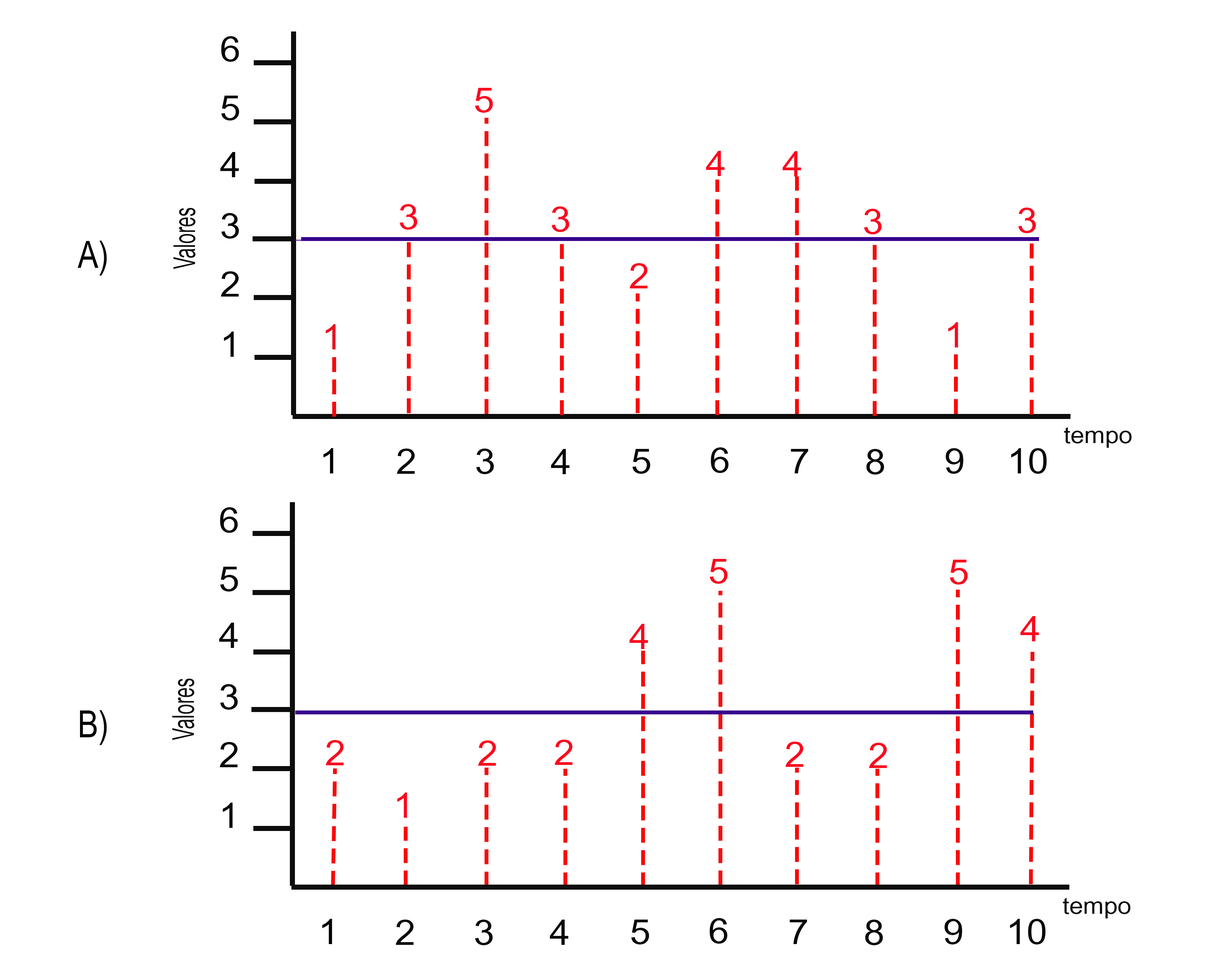
<style>
.page{position:relative;width:1224px;height:974px;background:#ffffff}
.page>*{position:absolute;margin:0}
.t1{font:59px "ArialNarrow";color:#090909;scale:1.32 1}
.t2{font:59px "ArialNarrow";color:#fb071e;scale:1.32 1}
.t3{font:51.8px "ArialNarrow";color:#090909;scale:0.76 1}
.t4{font:64.8px "ArialNarrow";color:#000000}
.t5{font:59px "ArialNarrow";color:#e61423;scale:1.32 1}
.t6{font:39.4px "ArialNarrow";color:#090909;scale:1.32 1}
.t7{font:59px "ArialNarrow";color:#000000;scale:1.32 1}
</style>
<div class="page">
<p class="t1" style="left:221px;top:36px;width:18px;height:26px">6</p>
<p class="t2" style="left:475px;top:88px;width:18px;height:25px">5</p>
<p class="t1" style="left:221px;top:96px;width:18px;height:24px">5</p>
<p class="t1" style="left:220px;top:152px;width:19px;height:25px">4</p>
<p class="t2" style="left:706px;top:151px;width:19px;height:25px">4</p>
<p class="t2" style="left:783px;top:151px;width:18px;height:25px">4</p>
<p class="t3" style="left:173px;top:208px;width:22px;height:61px;rotate:-90deg">Valores</p>
<p class="t2" style="left:400px;top:204px;width:17px;height:26px">3</p>
<p class="t2" style="left:552px;top:206px;width:17px;height:26px">3</p>
<p class="t2" style="left:864px;top:209px;width:18px;height:25px">3</p>
<p class="t2" style="left:1018px;top:208px;width:18px;height:25px">3</p>
<p class="t1" style="left:221px;top:213px;width:18px;height:26px">3</p>
<p class="t4" style="left:78px;top:241px;width:29px;height:35px">A)</p>
<p class="t2" style="left:630px;top:263px;width:18px;height:25px">2</p>
<p class="t1" style="left:221px;top:271px;width:18px;height:26px">2</p>
<p class="t5" style="left:326px;top:324px;width:10px;height:25px">1</p>
<p class="t2" style="left:948px;top:322px;width:10px;height:25px">1</p>
<p class="t1" style="left:224px;top:332px;width:10px;height:25px">1</p>
<p class="t6" style="left:1064px;top:427px;width:68px;height:21px">tempo</p>
<p class="t7" style="left:323px;top:448px;width:10px;height:25px">1</p>
<p class="t1" style="left:397px;top:449px;width:18px;height:25px">2</p>
<p class="t1" style="left:476px;top:449px;width:18px;height:25px">3</p>
<p class="t1" style="left:551px;top:449px;width:19px;height:25px">4</p>
<p class="t1" style="left:632px;top:449px;width:19px;height:25px">5</p>
<p class="t1" style="left:711px;top:447px;width:18px;height:26px">6</p>
<p class="t1" style="left:791px;top:449px;width:17px;height:24px">7</p>
<p class="t1" style="left:866px;top:449px;width:19px;height:26px">8</p>
<p class="t1" style="left:946px;top:448px;width:18px;height:26px">9</p>
<p class="t1" style="left:1011px;top:448px;width:36px;height:26px">10</p>
<p class="t1" style="left:220px;top:507px;width:18px;height:26px">6</p>
<p class="t1" style="left:220px;top:567px;width:18px;height:25px">5</p>
<p class="t2" style="left:710px;top:559px;width:18px;height:25px">5</p>
<p class="t2" style="left:950px;top:560px;width:18px;height:25px">5</p>
<p class="t2" style="left:1021px;top:616px;width:18px;height:25px">4</p>
<p class="t1" style="left:219px;top:623px;width:19px;height:25px">4</p>
<p class="t2" style="left:630px;top:624px;width:18px;height:25px">4</p>
<p class="t3" style="left:172px;top:679px;width:22px;height:61px;rotate:-90deg">Valores</p>
<p class="t1" style="left:220px;top:684px;width:18px;height:26px">3</p>
<p class="t4" style="left:80px;top:710px;width:27px;height:35px">B)</p>
<p class="t1" style="left:220px;top:742px;width:18px;height:25px">2</p>
<p class="t2" style="left:326px;top:740px;width:18px;height:25px">2</p>
<p class="t2" style="left:478px;top:740px;width:18px;height:26px">2</p>
<p class="t2" style="left:555px;top:740px;width:18px;height:25px">2</p>
<p class="t2" style="left:785px;top:742px;width:19px;height:25px">2</p>
<p class="t2" style="left:869px;top:743px;width:18px;height:25px">2</p>
<p class="t2" style="left:397px;top:792px;width:10px;height:26px">1</p>
<p class="t1" style="left:223px;top:803px;width:10px;height:25px">1</p>
<p class="t6" style="left:1063px;top:898px;width:68px;height:20px">tempo</p>
<p class="t7" style="left:322px;top:919px;width:10px;height:25px">1</p>
<p class="t1" style="left:396px;top:920px;width:18px;height:25px">2</p>
<p class="t1" style="left:475px;top:920px;width:18px;height:25px">3</p>
<p class="t1" style="left:550px;top:920px;width:19px;height:25px">4</p>
<p class="t1" style="left:631px;top:920px;width:18px;height:24px">5</p>
<p class="t1" style="left:710px;top:918px;width:18px;height:26px">6</p>
<p class="t1" style="left:790px;top:920px;width:17px;height:24px">7</p>
<p class="t1" style="left:865px;top:920px;width:18px;height:25px">8</p>
<p class="t1" style="left:944px;top:919px;width:19px;height:25px">9</p>
<p class="t1" style="left:1010px;top:919px;width:36px;height:25px">10</p>
</div>
